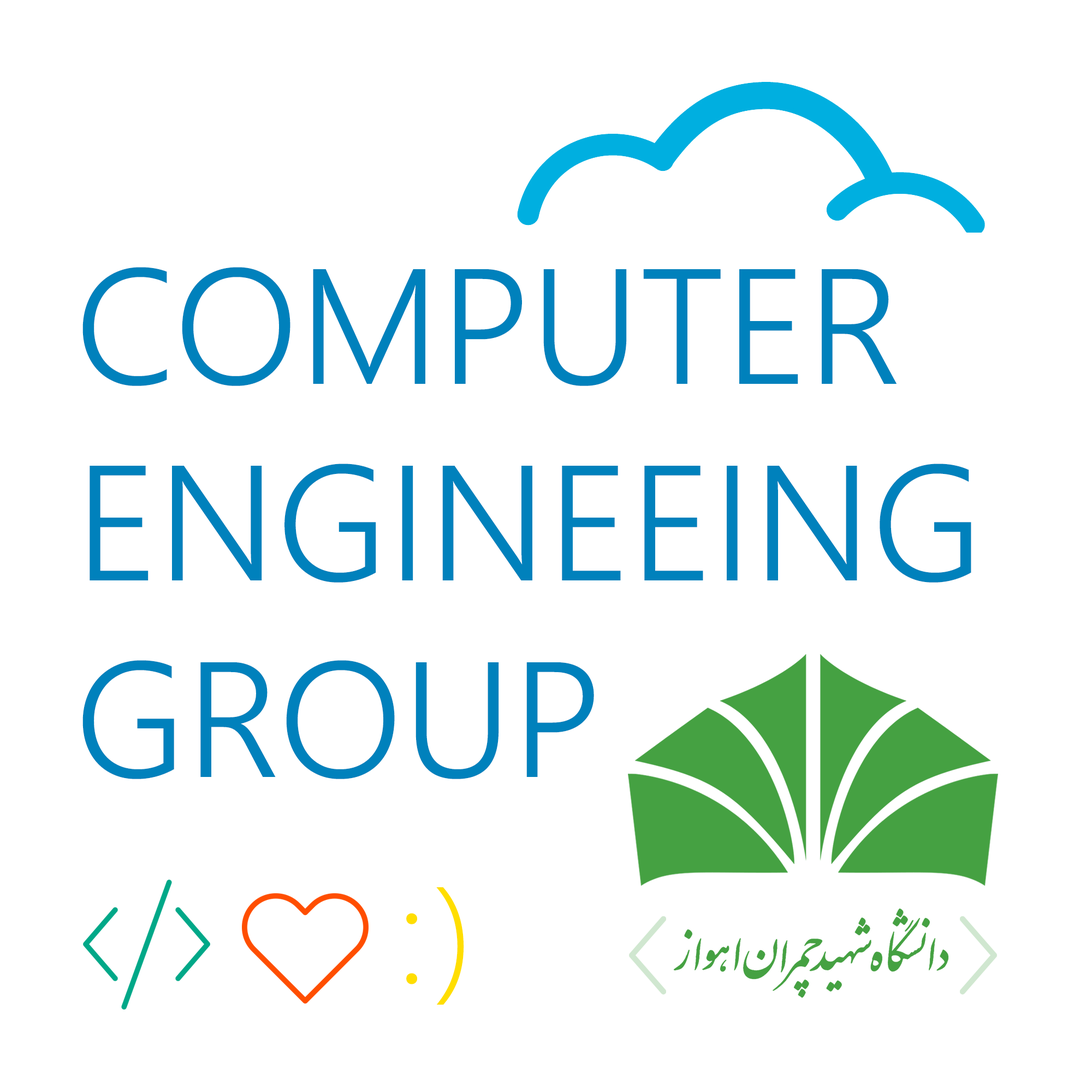
<style>
.page{position:relative;width:1092px;height:1092px;background:#ffffff}
.page>*{position:absolute;margin:0}
.t1{font:163.8px "SegoeUI-Semilight";color:#0072bc}
.t2{font:136.5px "SegoeUI-Light";letter-spacing:0.06em;color:#ffde00}
</style>
<div class="page">
<p class="t1" style="left:82px;top:267px;width:889px;height:512px">COMPUTER<br>ENGINEEING<br>GROUP</p>
<p class="t2" style="left:406px;top:887px;width:58px;height:118px">:)</p>
</div>
